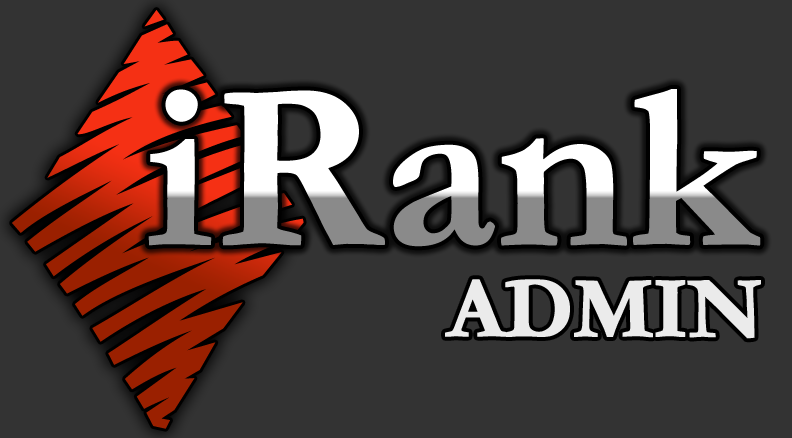
<style>
.page{position:relative;width:792px;height:438px;background:#333333}
.page>*{position:absolute;margin:0}
.t1{font:239.8px "Garamond-Bold";letter-spacing:-0.025em;font-weight:bold}
.t2{font:87.6px "Garamond-Bold";letter-spacing:-0.025em;color:#ffffff;font-weight:bold}
</style>
<div class="page">
<p class="t1" style="left:148px;top:89px;width:613px;height:158px">iRank</p>
<p class="t2" style="left:445px;top:279px;width:316px;height:60px">ADMIN</p>
</div>
